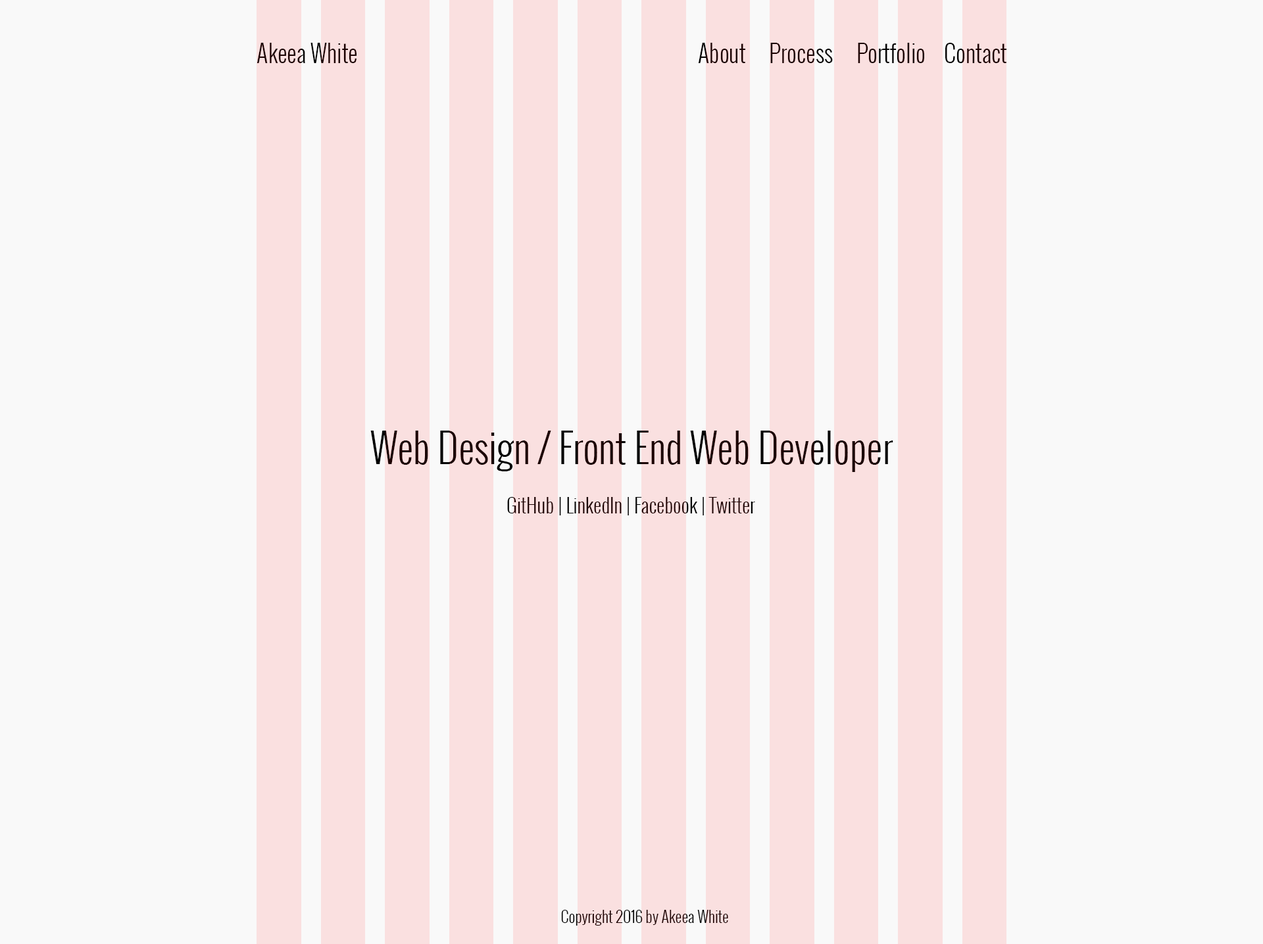
<style>
.page{position:relative;width:1263px;height:944px;background:#f9f9f9}
.page>*{position:absolute;margin:0}
.t1{font:23.7px "Oswald-Light";color:#1c0202}
.t2{font:39.5px "Oswald-Light"}
.t3{font:19.7px "Oswald-Light";color:#1c0202}
.t4{font:15.8px "Oswald-Light"}
</style>
<div class="page">
<p class="t1" style="left:256px;top:43px;width:100px;height:20px">Akeea White</p>
<p class="t1" style="left:698px;top:43px;width:308px;height:20px">About     Process     Portfolio    Contact</p>
<p class="t2" style="left:370px;top:431px;width:523px;height:41px">Web Design / Front End Web Developer</p>
<p class="t3" style="left:507px;top:497px;width:248px;height:19px">GitHub | LinkedIn | Facebook | Twitter</p>
<p class="t4" style="left:561px;top:910px;width:167px;height:16px">Copyright 2016 by Akeea White</p>
</div>
